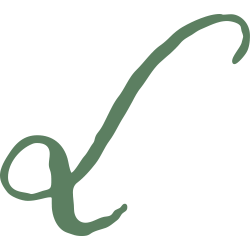
<style>
.page{position:relative;width:250px;height:250px;background:#ffffff}
.page>*{position:absolute;margin:0}
.t1{font:225px "LamarPen";color:#5c7f61}
</style>
<div class="page">
<p class="t1" style="left:0px;top:14px;width:250px;height:222px">L</p>
</div>
